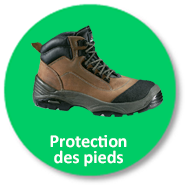
<style>
.page{position:relative;width:185px;height:185px;background:#00cc66}
.page>*{position:absolute;margin:0}
.t1{font:18px/16px "Calibri-Bold";color:#ffffff}
</style>
<div class="page">
<p class="t1" style="left:50px;top:135px;width:77px;height:32px;text-align:center">Protection <br>des pieds</p>
</div>
